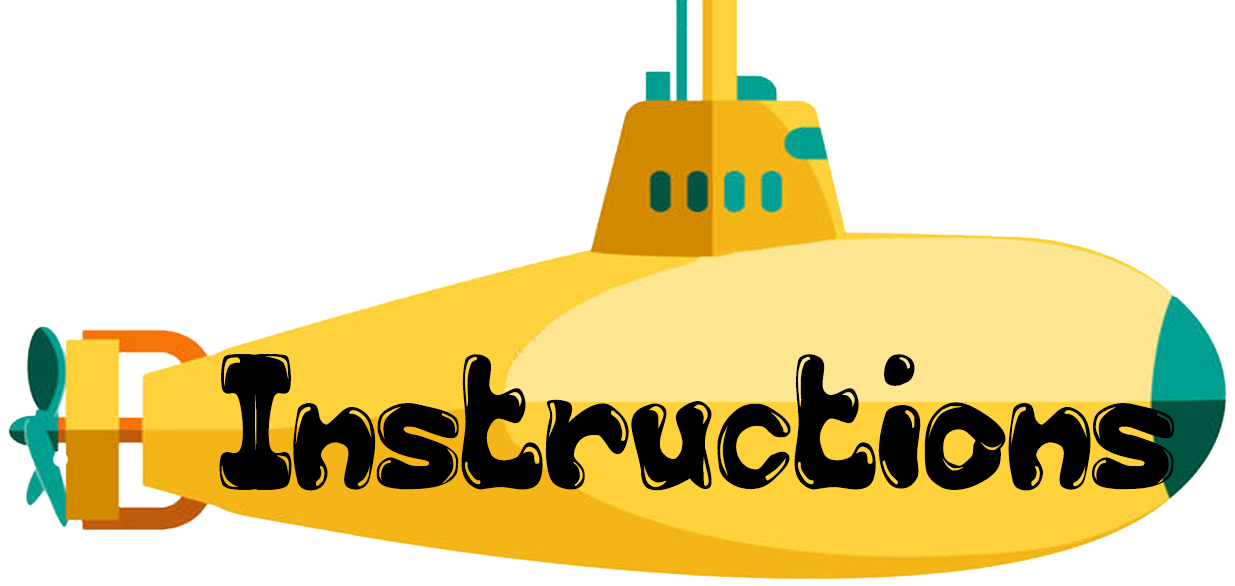
<style>
.page{position:relative;width:1235px;height:586px;background:#ffffff}
.page>*{position:absolute;margin:0}
.t1{font:168.7px "GFS-Custom-Bubble1";color:#000000;scale:0.79 1}
</style>
<div class="page">
<p class="t1" style="left:219px;top:354px;width:956px;height:137px">Instructions</p>
</div>
